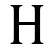
<style>
.page{position:relative;width:50px;height:50px;background:#ffffff}
.page>*{position:absolute;margin:0}
.t1{font:58.3px "CambriaMath";color:#000000}
</style>
<div class="page">
<p class="t1" style="left:10px;top:5px;width:34px;height:39px">H</p>
</div>
